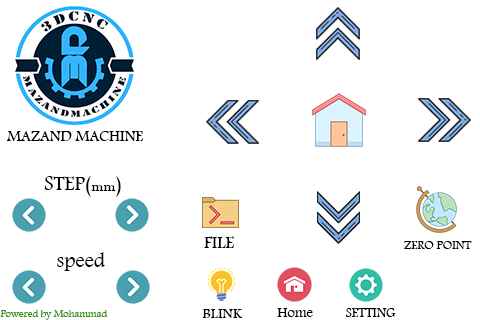
<style>
.page{position:relative;width:480px;height:320px;background:#ffffff}
.page>*{position:absolute;margin:0}
.t1{font:15.9px "Arash";color:#000000}
.t2{font:21.2px "Arash";color:#000000}
.t3{font:21.2px "ArabicTypesetting";color:#000000}
.t4{font:18px "Arash";color:#000000}
.t5{font:12.7px "Arash";color:#000000}
.t6{font:10.7px "Arash";color:#318b04}
.t7{font:15.3px "Arash";color:#000000}
.t8{font:14.8px "Arash";color:#000000}
.t9{font:13.8px "Arash";color:#000000}
</style>
<div class="page">
<p class="t1" style="left:7px;top:131px;width:137px;height:10px">MAZAND MACHINE</p>
<p class="t2" style="left:44px;top:176px;width:77px;height:21px">(STEP(<span class="t3">mm</span></p>
<p class="t4" style="left:204px;top:236px;width:30px;height:12px">FILE</p>
<p class="t5" style="left:404px;top:241px;width:68px;height:8px">ZERO POINT</p>
<p class="t2" style="left:57px;top:252px;width:48px;height:19px">speed</p>
<p class="t6" style="left:0px;top:310px;width:108px;height:10px">Powered by Mohammad</p>
<p class="t7" style="left:202px;top:309px;width:40px;height:9px">BLINK</p>
<p class="t8" style="left:277px;top:308px;width:36px;height:9px">Home</p>
<p class="t9" style="left:346px;top:308px;width:50px;height:9px">SETTING</p>
</div>
